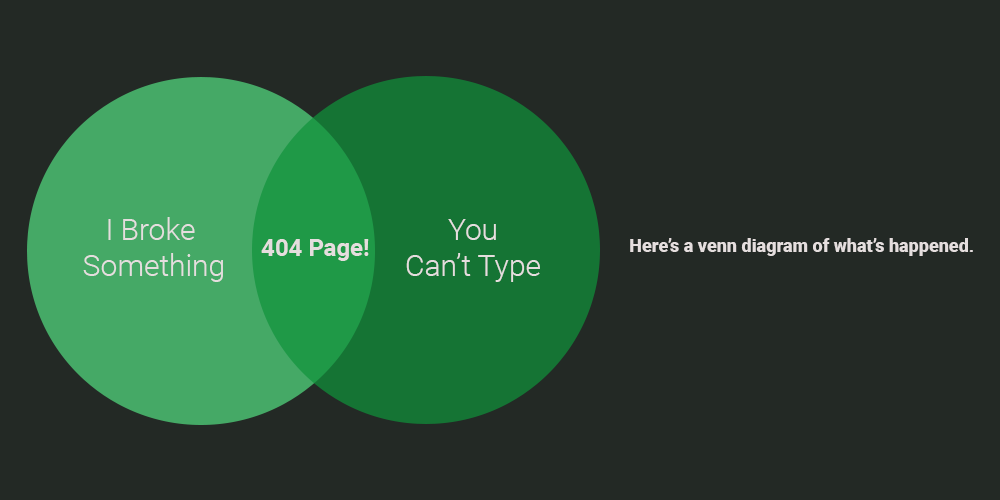
<style>
.page{position:relative;width:1000px;height:500px;background:#232925}
.page>*{position:absolute;margin:0}
.t1{font:30px "Roboto-Light";color:#e5dfdf}
.t2{font:24px "Roboto-Bold";color:#e5dfdf}
.t3{font:18px "Roboto-Black";color:#e5dfdf}
</style>
<div class="page">
<p class="t1" style="left:83px;top:217px;width:140px;height:65px;text-align:center">I Broke <br>Something</p>
<p class="t1" style="left:406px;top:219px;width:134px;height:63px;text-align:center">You<br>Can’t Type</p>
<p class="t2" style="left:261px;top:239px;width:108px;height:22px">404 Page!</p>
<p class="t3" style="left:630px;top:238px;width:343px;height:18px">Here’s a venn diagram of what’s happened.</p>
</div>
